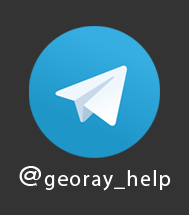
<style>
.page{position:relative;width:189px;height:215px;background:#333333}
.page>*{position:absolute;margin:0}
.t1{font:30px "MyriadArabic-Regular";letter-spacing:0.05em;color:#ffffff}
.t2{font:30px "CopperplateGothic-Bold";letter-spacing:0.05em;color:#ffffff}
</style>
<div class="page">
<p class="t1" style="left:19px;top:166px;width:152px;height:25px"><span class="t2">@</span>georay_help</p>
</div>
